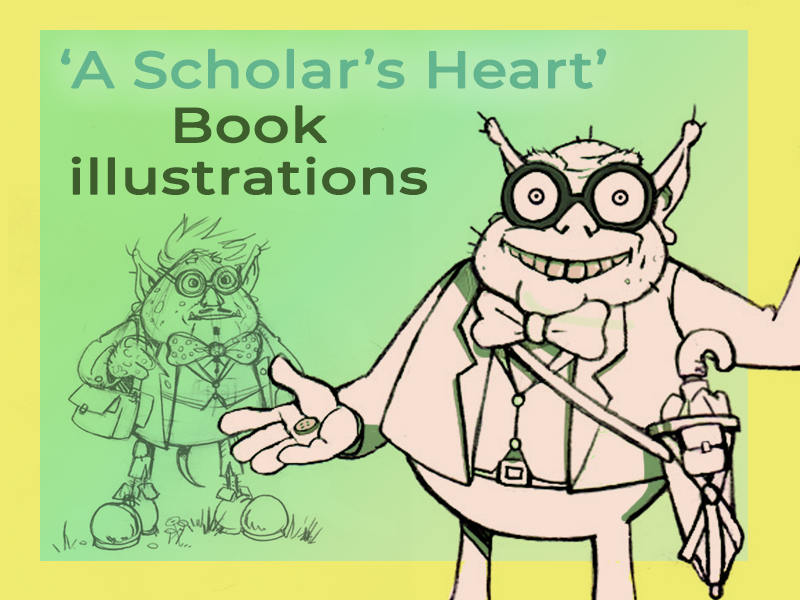
<style>
.page{position:relative;width:800px;height:600px}
.page>*{position:absolute;margin:0}
.t1{font:51.3px "Montserrat-Medium";color:#64b68e;font-weight:bold;scale:1.12 1}
.t2{font:48.4px/51.8px "Montserrat-Medium";color:#3d5d2c;font-weight:bold;scale:1.19 1}
</style>
<div class="page">
<p class="t1" style="left:61px;top:48px;width:546px;height:41px">‘A Scholar’s Heart’</p>
<p class="t2" style="left:71px;top:105px;width:356px;height:90px;text-align:center">Book<br>illustrations</p>
</div>
